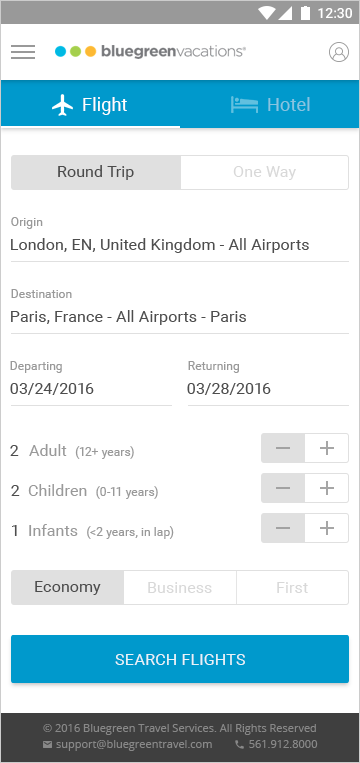
<style>
.page{position:relative;width:360px;height:763px;background:#ffffff}
.page>*{position:absolute;margin:0}
.t1{font:18px "Roboto-Regular";letter-spacing:0.01em;color:#ffffff}
.t2{font:18px "Roboto-Regular";letter-spacing:0.01em;color:#88c4e0}
.t3{font:16px "Roboto-Regular";letter-spacing:0.01em;color:#4b4b4b}
.t4{font:16px "Roboto-Regular";letter-spacing:0.01em;color:#d8d8d8}
.t5{font:12px "Roboto-Regular";letter-spacing:0.01em;color:#999999}
.t6{font:16px "Roboto-Regular";letter-spacing:0.01em;color:#4d4d4d}
.t7{font:16px "Roboto-Regular";letter-spacing:0.01em;color:#999999}
.t8{font:16px "Roboto-Regular";letter-spacing:0.01em;color:#333333}
.t9{font:16px "Roboto-Regular";letter-spacing:0.01em;color:#ffffff;text-transform:uppercase}
</style>
<div class="page">
<p class="t1" style="left:83px;top:97px;width:44px;height:18px">Flight</p>
<p class="t2" style="left:268px;top:97px;width:42px;height:14px">Hotel</p>
<p class="t3" style="left:58px;top:165px;width:76px;height:15px">Round Trip</p>
<p class="t4" style="left:233px;top:166px;width:63px;height:14px">One Way</p>
<p class="t5" style="left:11px;top:217px;width:32px;height:12px">Origin</p>
<p class="t6" style="left:11px;top:238px;width:298px;height:15px">London, EN, United Kingdom - All Airports</p>
<p class="t5" style="left:11px;top:289px;width:61px;height:9px">Destination</p>
<p class="t6" style="left:11px;top:310px;width:235px;height:15px">Paris, France - All Airports - Paris</p>
<p class="t5" style="left:10px;top:361px;width:52px;height:12px">Departing</p>
<p class="t5" style="left:188px;top:361px;width:51px;height:12px">Returning</p>
<p class="t6" style="left:10px;top:383px;width:84px;height:12px">03/24/2016</p>
<p class="t6" style="left:187px;top:383px;width:84px;height:12px">03/28/2016</p>
<p class="t6" style="left:10px;top:445px;width:9px;height:11px">2</p>
<p class="t5" style="left:29px;top:444px;width:105px;height:15px"><span class="t7">Adult  </span>(12+ years)</p>
<p class="t6" style="left:11px;top:485px;width:9px;height:11px">2</p>
<p class="t5" style="left:28px;top:484px;width:130px;height:15px"><span class="t7">Children  </span>(0-11 years)</p>
<p class="t6" style="left:12px;top:525px;width:5px;height:11px">1</p>
<p class="t5" style="left:29px;top:524px;width:145px;height:15px"><span class="t7">Infants  </span>(&lt;2 years, in lap)</p>
<p class="t8" style="left:35px;top:581px;width:66px;height:14px;opacity:0.87">Economy</p>
<p class="t4" style="left:148px;top:582px;width:64px;height:11px">Business</p>
<p class="t4" style="left:277px;top:582px;width:31px;height:11px">First</p>
<p class="t9" style="left:115px;top:654px;width:130px;height:11px;opacity:0.87">Search flights</p>
</div>
